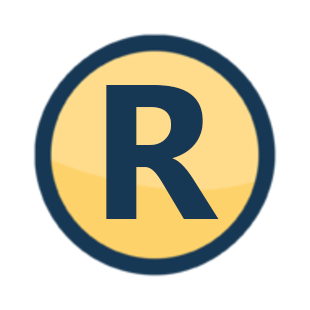
<style>
.page{position:relative;width:310px;height:310px;background:#ffffff}
.page>*{position:absolute;margin:0}
.t1{font:190.5px "SegoeUI-Bold";color:#173854}
</style>
<div class="page">
<p class="t1" style="left:106px;top:85px;width:113px;height:134px">R</p>
</div>
